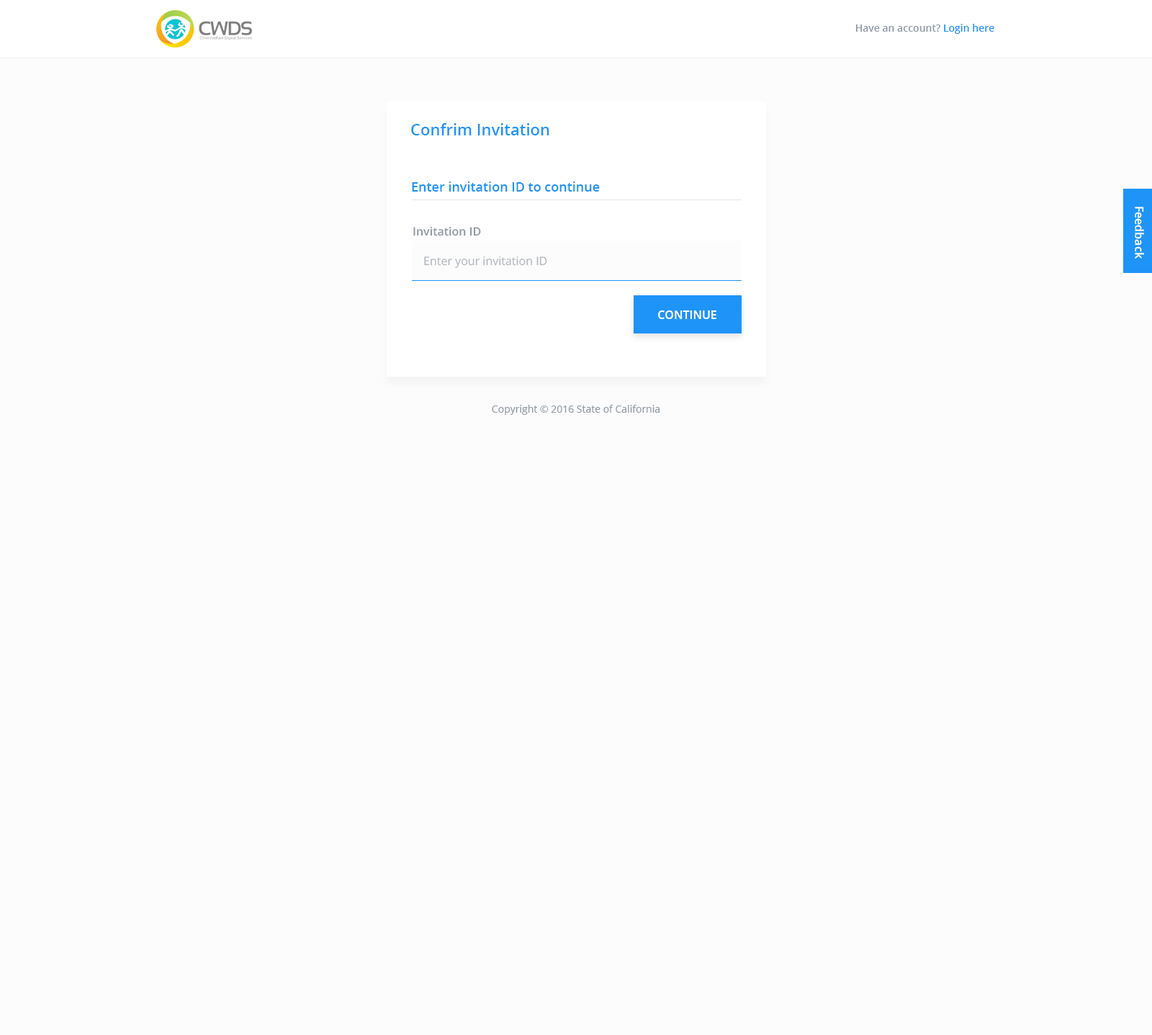
<style>
.page{position:relative;width:1152px;height:1035px;background:#fcfcfc}
.page>*{position:absolute;margin:0}
.t1{font:10.1px "OpenSans-Semibold";color:#919aa5}
.t2{font:10.1px "OpenSans-Semibold";color:#1e94f8}
.t3{font:15.8px "OpenSans-Semibold";color:#1e94f8}
.t4{font:13px "OpenSans-Semibold";color:#1e94f8}
.t5{font:11.5px "OpenSans-Semibold";color:#ffffff}
.t6{font:11.5px "OpenSans-Semibold";color:#919aa5}
.t7{font:11.5px "OpenSans";color:#b5bac1}
.t8{font:11.5px "OpenSans-Semibold";color:#ffffff;text-transform:uppercase}
.t9{font:10.1px "OpenSans";color:#919aa5}
</style>
<div class="page">
<p class="t1" style="left:856px;top:24px;width:139px;height:10px">Have an account? <span class="t2">Login here</span></p>
<p class="t3" style="left:411px;top:123px;width:138px;height:12px">Confrim Invitation</p>
<p class="t4" style="left:412px;top:181px;width:188px;height:11px">Enter invitation ID to continue</p>
<p class="t5" style="left:1135px;top:207px;width:9px;height:52px;rotate:90deg">Feedback</p>
<p class="t6" style="left:413px;top:227px;width:68px;height:9px">Invitation ID</p>
<p class="t7" style="left:424px;top:256px;width:123px;height:12px">Enter your invitation ID</p>
<p class="t8" style="left:658px;top:310px;width:59px;height:9px">Continue</p>
<p class="t9" style="left:492px;top:405px;width:168px;height:10px">Copyright © 2016 State of California</p>
</div>
